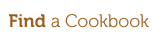
<style>
.page{position:relative;width:162px;height:40px;background:#ffffff}
.page>*{position:absolute;margin:0}
.t1{font:18px "Museo-300";color:#9c5c1a}
.t2{font:18px "Museo-700";color:#9c5c1a}
</style>
<div class="page">
<p class="t1" style="left:9px;top:14px;width:140px;height:14px"><span class="t2">Find </span>a Cookbook</p>
</div>
